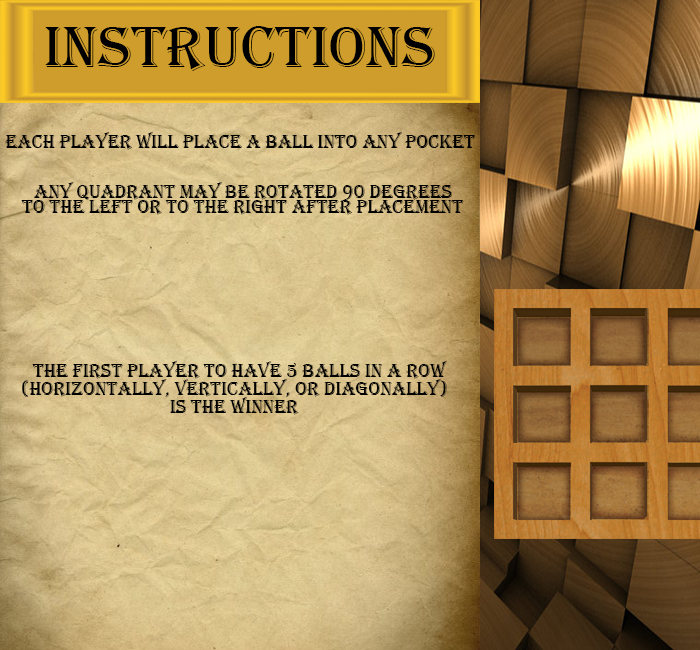
<style>
.page{position:relative;width:700px;height:650px}
.page>*{position:absolute;margin:0}
.t1{font:60px "Algerian";color:#000000}
.t2{font:19px "Algerian";color:#000000}
</style>
<div class="page">
<p class="t1" style="left:45px;top:26px;width:390px;height:45px">Instructions</p>
<p class="t2" style="left:5px;top:131px;width:471px;height:19px">each player will place a ball into any pocket</p>
<p class="t2" style="left:34px;top:181px;width:418px;height:20px">any quadrant may be rotated 90 degrees</p>
<p class="t2" style="left:21px;top:200px;width:443px;height:15px">to the left or to the right after placement</p>
<p class="t2" style="left:32px;top:360px;width:415px;height:19px">the first player to have 5 balls in a row</p>
<p class="t2" style="left:22px;top:378px;width:425px;height:20px">(horizontally, vertically, or diagonally)</p>
<p class="t2" style="left:170px;top:396px;width:129px;height:19px">is the winner</p>
</div>
